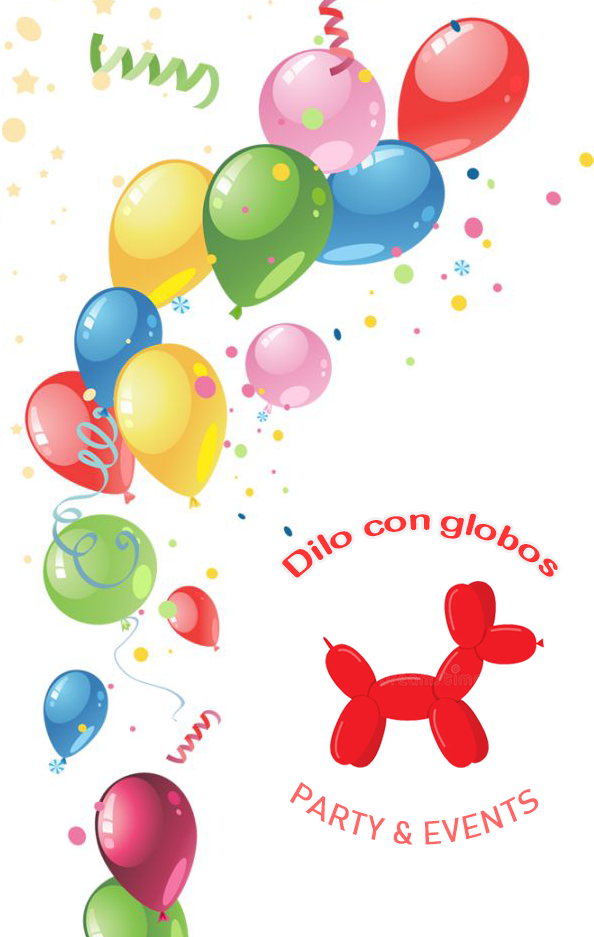
<style>
.page{position:relative;width:594px;height:937px;background:#ffffff}
.page>*{position:absolute;margin:0}
.t1{font:31.5px "ArialRoundedMTBold";color:#ff3333;scale:1.05 1}
.t2{font:32.8px "Bahnschrift";color:#ff6666;scale:0.89 1}
</style>
<div class="page">
<p class="t1" style="left:282px;top:513px;width:276px;height:65px">Dilo con globos</p>
<p class="t2" style="left:290px;top:782px;width:249px;height:63px">PARTY &amp; EVENTS</p>
</div>
